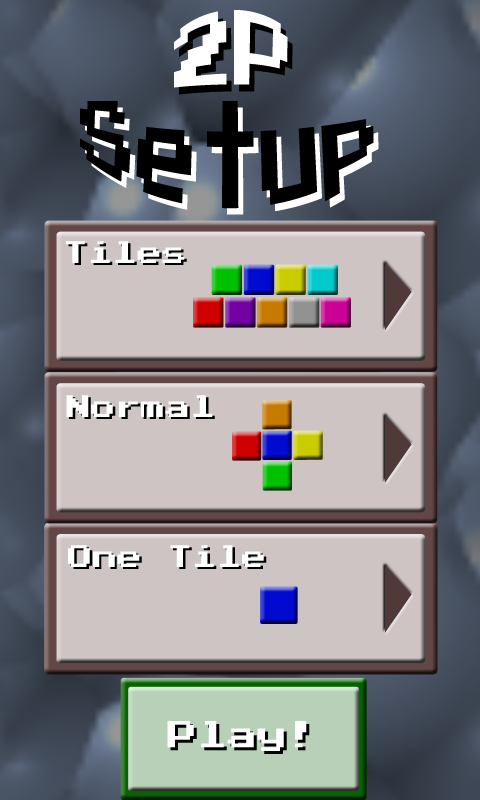
<style>
.page{position:relative;width:480px;height:800px;background:#cfc4c4}
.page>*{position:absolute;margin:0}
.t1{font:60px "PressStart2P";color:#ffffff}
.t2{font:60px "PressStart2P";color:#000000}
.t3{font:24.9px "PressStart2P";color:#ffffff}
.t4{font:24.9px "PressStart2P"}
.t5{font:24.9px "PressStart2P";color:#fefefe}
.t6{font:30px "PressStart2P";color:#ffffff}
.t7{font:30px "PressStart2P"}
</style>
<div class="page">
<p class="t1" style="left:174px;top:10px;width:114px;height:78px">2P</p>
<p class="t2" style="left:80px;top:101px;width:294px;height:108px;text-align:center">Setup</p>
<p class="t3" style="left:66px;top:241px;width:119px;height:22px">Tiles</p>
<p class="t4" style="left:68px;top:243px;width:119px;height:22px">Tiles</p>
<p class="t3" style="left:66px;top:395px;width:147px;height:22px">Normal</p>
<p class="t4" style="left:69px;top:397px;width:146px;height:22px">Normal</p>
<p class="t5" style="left:68px;top:545px;width:196px;height:22px">One Tile</p>
<p class="t4" style="left:70px;top:547px;width:197px;height:22px">One Tile</p>
<p class="t6" style="left:167px;top:721px;width:140px;height:30px">Play!</p>
<p class="t7" style="left:170px;top:724px;width:140px;height:30px">Play!</p>
</div>
